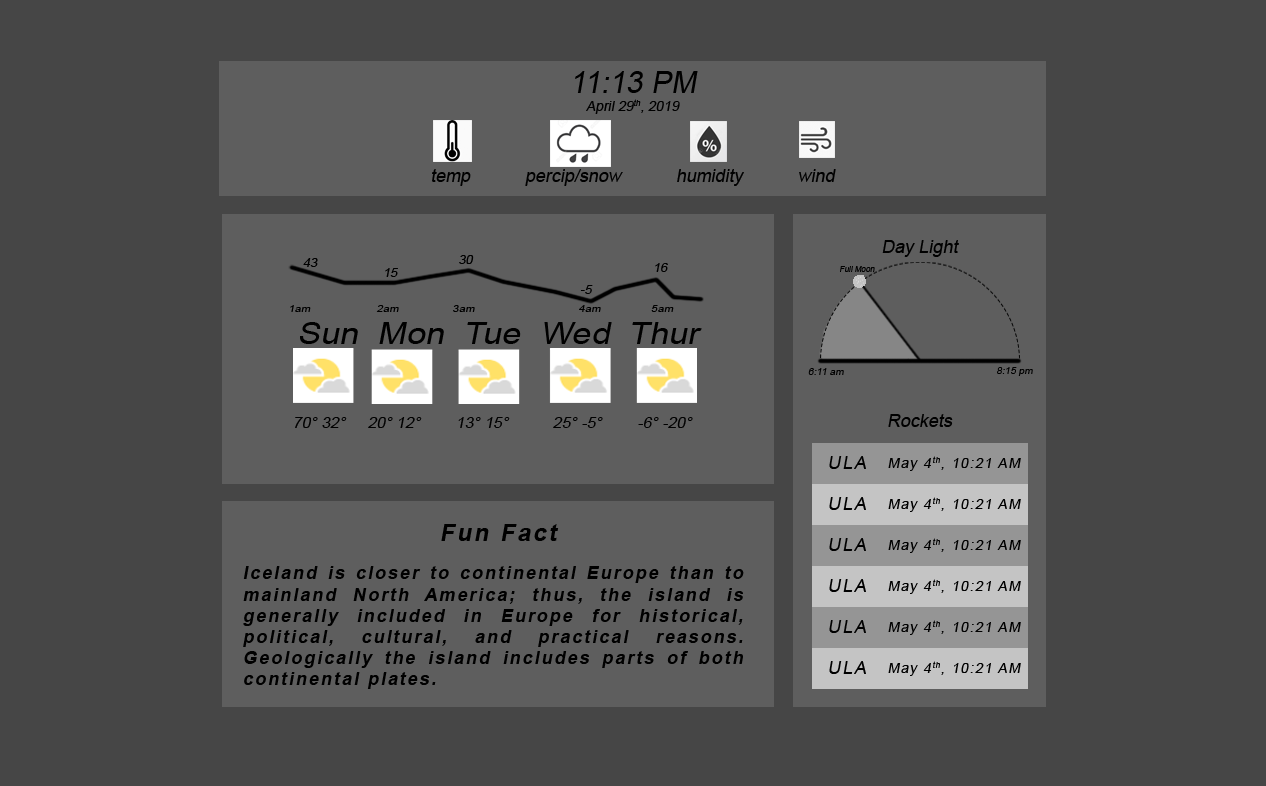
<style>
.page{position:relative;width:1266px;height:786px;background:#464646}
.page>*{position:absolute;margin:0}
.t1{font:30.6px "ArialMT";color:#000000;font-style:italic}
.t2{font:14.3px "ArialMT";color:#000000;font-style:italic}
.t3{font:18.4px "ArialMT";color:#000000;font-style:italic}
.t4{font:11.5px "ArialMT";color:#000000;font-style:italic;scale:1.09 1}
.t5{font:8.2px "ArialMT";color:#000000;font-style:italic}
.t6{font:10.5px "ArialMT";color:#000000;font-style:italic;scale:1.09 1}
.t7{font:31.4px "ArialMT";color:#000000;font-style:italic;scale:1.09 1}
.t8{font:10.2px "ArialMT";color:#000000;font-style:italic}
.t9{font:14.7px "ArialMT";color:#000000;font-style:italic;scale:1.09 1}
.t10{font:18.4px "ArialMT";letter-spacing:0.1em;color:#000000;font-style:italic}
.t11{font:14.3px "ArialMT";letter-spacing:0.1em;color:#000000;font-style:italic}
.t12{font:23.9px "Arial-BoldMT";letter-spacing:0.1em;color:#000000;font-style:italic}
.t13{font:18.2px/21.2px "Arial-BoldMT";letter-spacing:0.1em;color:#000000;font-style:italic}
</style>
<div class="page">
<p class="t1" style="left:575px;top:71px;width:123px;height:22px">11:13 PM</p>
<p class="t2" style="left:586px;top:99px;width:94px;height:15px">April 29th, 2019</p>
<p class="t3" style="left:432px;top:169px;width:404px;height:17px">temp           percip/snow           humidity           wind</p>
<p class="t3" style="left:882px;top:240px;width:77px;height:17px">Day Light</p>
<p class="t4" style="left:459px;top:255px;width:15px;height:9px">30</p>
<p class="t4" style="left:303px;top:258px;width:15px;height:9px">43</p>
<p class="t4" style="left:385px;top:268px;width:13px;height:9px">15</p>
<p class="t4" style="left:655px;top:263px;width:13px;height:9px">16</p>
<p class="t5" style="left:840px;top:266px;width:35px;height:6px">Full Moon</p>
<p class="t4" style="left:580px;top:285px;width:13px;height:9px">-5</p>
<p class="t6" style="left:290px;top:305px;width:384px;height:7px">1am                     2am                 3am                                 4am                5am</p>
<p class="t7" style="left:300px;top:322px;width:402px;height:22px">Sun  Mon  Tue  Wed  Thur</p>
<p class="t8" style="left:808px;top:368px;width:36px;height:7px">6:11 am</p>
<p class="t8" style="left:997px;top:367px;width:36px;height:9px">8:15 pm</p>
<p class="t3" style="left:888px;top:414px;width:65px;height:13px">Rockets</p>
<p class="t9" style="left:295px;top:417px;width:398px;height:11px">70° 32°     20° 12°        13° 15°          25° -5°        -6° -20°</p>
<p class="t10" style="left:829px;top:456px;width:37px;height:13px">ULA</p>
<p class="t11" style="left:888px;top:456px;width:133px;height:15px">May 4th, 10:21 AM</p>
<p class="t10" style="left:829px;top:497px;width:37px;height:13px">ULA</p>
<p class="t11" style="left:888px;top:497px;width:133px;height:15px">May 4th, 10:21 AM</p>
<p class="t12" style="left:441px;top:524px;width:118px;height:17px">Fun Fact</p>
<p class="t10" style="left:829px;top:538px;width:37px;height:13px">ULA</p>
<p class="t11" style="left:888px;top:538px;width:133px;height:15px">May 4th, 10:21 AM</p>
<p class="t13" style="left:243px;top:566px;width:501px;height:123px;text-align:justify">Iceland is closer to continental Europe than to mainland North America; thus, the island is generally included in Europe for historical, political, cultural, and practical reasons. Geologically the island includes parts of both continental plates.</p>
<p class="t10" style="left:829px;top:579px;width:37px;height:13px">ULA</p>
<p class="t11" style="left:888px;top:579px;width:133px;height:15px">May 4th, 10:21 AM</p>
<p class="t10" style="left:829px;top:620px;width:37px;height:13px">ULA</p>
<p class="t11" style="left:888px;top:620px;width:133px;height:15px">May 4th, 10:21 AM</p>
<p class="t10" style="left:829px;top:661px;width:37px;height:13px">ULA</p>
<p class="t11" style="left:888px;top:661px;width:133px;height:15px">May 4th, 10:21 AM</p>
</div>
